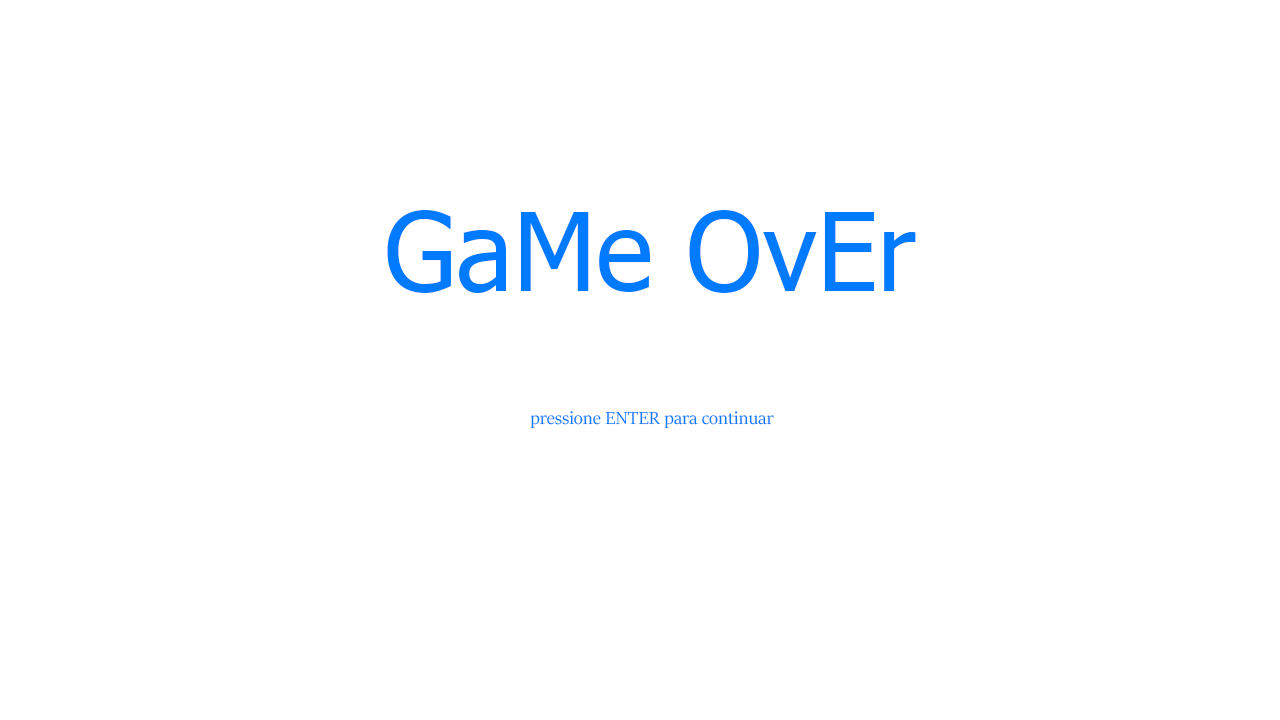
<style>
.page{position:relative;width:1280px;height:720px;background:#ffffff}
.page>*{position:absolute;margin:0}
.t1{font:108.4px "Tahoma";color:#007aff}
.t2{font:19.6px "SitkaBanner";color:#007aff}
</style>
<div class="page">
<p class="t1" style="left:387px;top:210px;width:529px;height:83px">GaMe OvEr</p>
<p class="t2" style="left:530px;top:411px;width:244px;height:18px">pressione ENTER para continuar</p>
</div>
